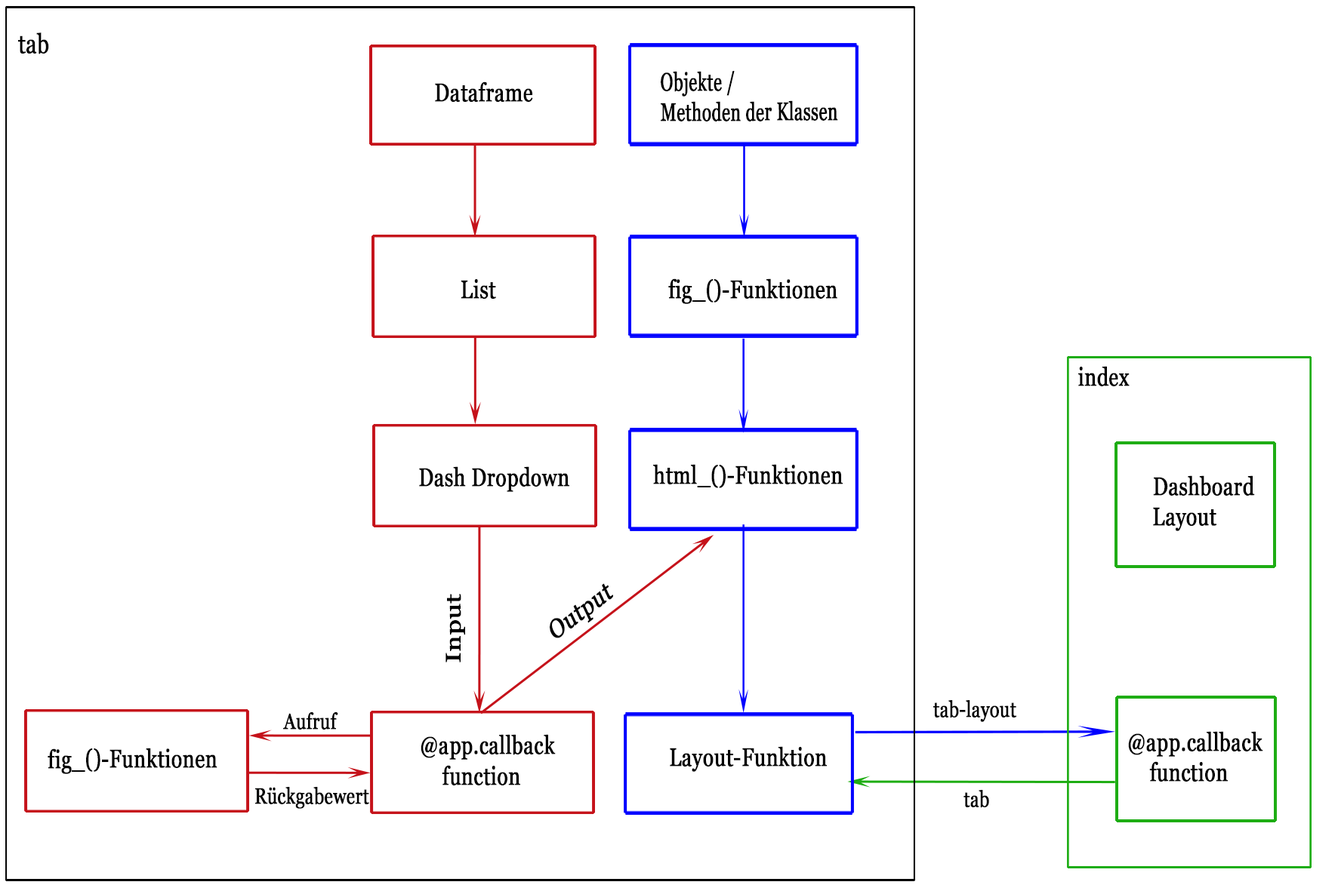
<style>
.page{position:relative;width:1338px;height:891px;background:#ffffff}
.page>*{position:absolute;margin:0}
.t1{font:26.6px "Georgia";color:#000000;font-weight:bold;scale:0.79 1}
.t2{font:25.4px "Georgia";color:#000000;font-weight:bold;scale:0.67 1}
.t3{font:25.4px "Georgia";color:#000000;font-weight:bold;scale:0.79 1}
.t4{font:25.3px "Georgia";color:#000000;font-weight:bold;scale:0.89 1}
.t5{font:21px "Georgia";color:#000000;font-weight:bold;scale:1.27 1}
.t6{font:22px "Georgia";color:#000000;font-weight:bold;scale:0.79 1}
</style>
<div class="page">
<p class="t1" style="left:18px;top:32px;width:31px;height:22px">tab</p>
<p class="t2" style="left:660px;top:71px;width:178px;height:51px">Objekte / <br>Methoden der Klassen</p>
<p class="t3" style="left:435px;top:82px;width:98px;height:20px">Dataframe</p>
<p class="t3" style="left:460px;top:279px;width:36px;height:20px">List</p>
<p class="t3" style="left:668px;top:279px;width:169px;height:25px">fig_()-Funktionen</p>
<p class="t3" style="left:1078px;top:366px;width:51px;height:20px">index</p>
<p class="t3" style="left:419px;top:466px;width:150px;height:26px">Dash Dropdown</p>
<p class="t3" style="left:653px;top:464px;width:189px;height:24px">html_()-Funktionen</p>
<p class="t3" style="left:1153px;top:476px;width:102px;height:55px">Dashboard<br>Layout</p>
<p class="t4" style="left:550px;top:583px;width:63px;height:56px;rotate:-37deg">Output</p>
<p class="t5" style="left:445px;top:594px;width:20px;height:69px;rotate:-90deg">Input</p>
<p class="t6" style="left:933px;top:700px;width:83px;height:22px">tab-layout</p>
<p class="t6" style="left:283px;top:713px;width:55px;height:17px">Aufruf</p>
<p class="t3" style="left:420px;top:734px;width:136px;height:52px">@app.callback<br> function</p>
<p class="t3" style="left:1128px;top:731px;width:135px;height:51px">@app.callback<br> function</p>
<p class="t3" style="left:48px;top:748px;width:169px;height:26px">fig_()-Funktionen</p>
<p class="t3" style="left:670px;top:747px;width:157px;height:25px">Layout-Funktion</p>
<p class="t6" style="left:255px;top:787px;width:114px;height:22px">Rückgabewert</p>
<p class="t6" style="left:963px;top:790px;width:26px;height:18px">tab</p>
</div>
